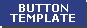
<style>
.page{position:relative;width:87px;height:28px;background:#2f3e82}
.page>*{position:absolute;margin:0}
.t1{font:10.5px/10px "Verdana-Bold";color:#ffffff}
</style>
<div class="page">
<p class="t1" style="left:10px;top:4px;width:65px;height:18px;text-align:center">BUTTON<br>TEMPLATE</p>
</div>
